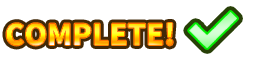
<style>
.page{position:relative;width:256px;height:64px;background:#ffffff}
.page>*{position:absolute;margin:0}
.t1{font:28.9px "Keifont"}
</style>
<div class="page">
<p class="t1" style="left:6px;top:23px;width:167px;height:23px">COMPLETE!</p>
</div>
